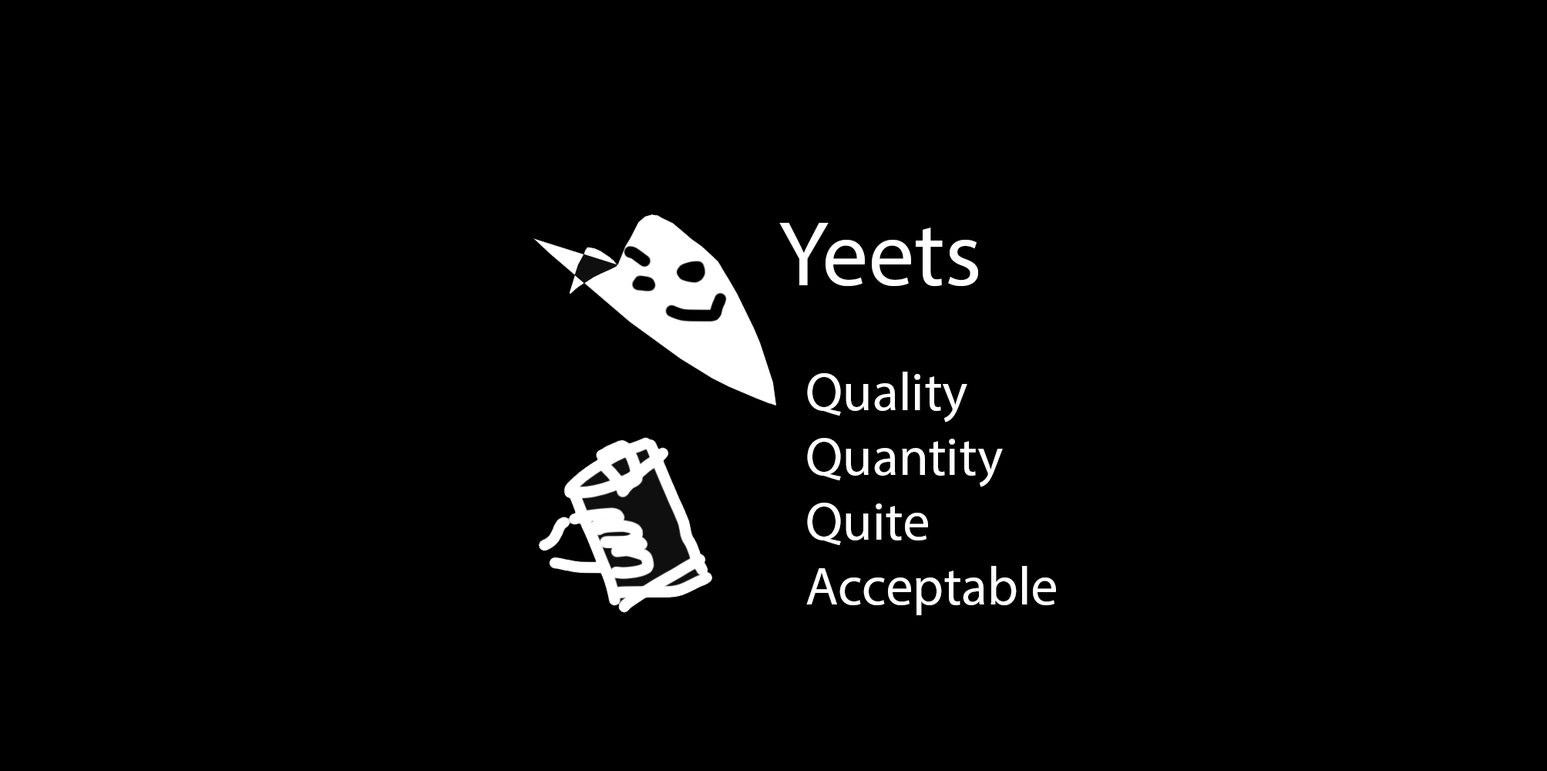
<style>
.page{position:relative;width:1547px;height:771px;background:#000000}
.page>*{position:absolute;margin:0}
.t1{font:92.5px "MyriadPro-Regular";color:#ffffff}
.t2{font:54px "MyriadPro-Regular";color:#ffffff}
</style>
<div class="page">
<p class="t1" style="left:779px;top:223px;width:199px;height:64px">Yeets</p>
<p class="t2" style="left:806px;top:372px;width:250px;height:243px">Quality<br>Quantity<br>Quite Acceptable</p>
</div>
